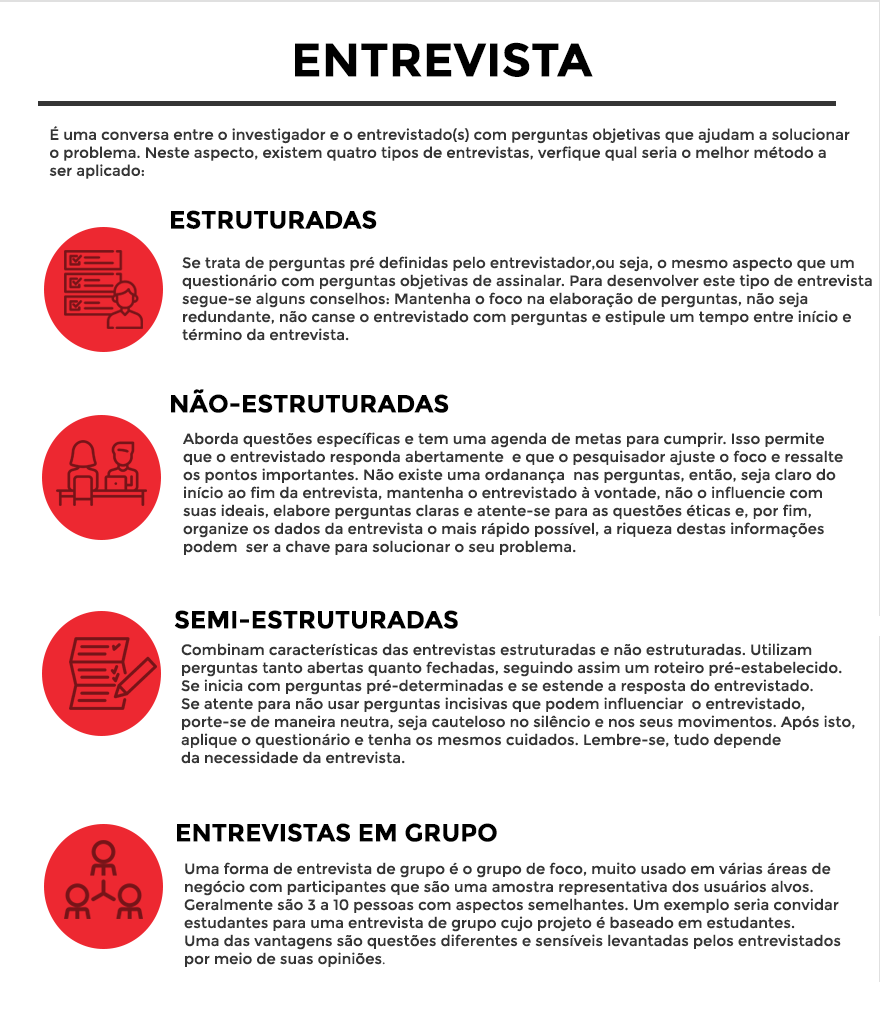
<style>
.page{position:relative;width:880px;height:1034px;background:#ffffff}
.page>*{position:absolute;margin:0}
.t1{font:47px "Montserrat-Bold";color:#000000}
.t2{font:15px/18px "Montserrat-Regular";color:#353535}
.t3{font:25px "Montserrat-Bold";color:#000000}
.t4{font:15px "Montserrat-Regular";color:#353535}
.t5{font:15px "MyriadPro-Regular";color:#353535}
</style>
<div class="page">
<p class="t1" style="left:295px;top:42px;width:298px;height:35px">ENTREVISTA</p>
<p class="t2" style="left:49px;top:126px;width:801px;height:53px">É uma conversa entre o investigador e o entrevistado(s) com perguntas objetivas que ajudam a solucionar <br>o problema. Neste aspecto, existem quatro tipos de entrevistas, verfique qual seria o melhor método a <br>ser aplicado:</p>
<p class="t3" style="left:171px;top:210px;width:206px;height:19px">ESTRUTURADAS</p>
<p class="t4" style="left:182px;top:256px;width:690px;height:85px">Se trata de perguntas pré definidas pelo entrevistador,ou seja, o mesmo aspecto que um <br>questionário com perguntas objetivas de assinalar. Para desenvolver este tipo de entrevista<br>segue-se alguns conselhos: Mantenha o foco na elaboração de perguntas, não seja <br>redundante, não canse o entrevistado com perguntas e estipule um tempo entre início e <br>término da entrevista.</p>
<p class="t3" style="left:171px;top:389px;width:278px;height:24px">NÃO-ESTRUTURADAS</p>
<p class="t4" style="left:183px;top:432px;width:660px;height:123px">Aborda questões específicas e tem uma agenda de metas para cumprir. Isso permite <br>que o entrevistado responda abertamente  e que o pesquisador ajuste o foco e ressalte <br>os pontos importantes. Não existe uma ordanança  nas perguntas, então, seja claro do <br>início ao fim da entrevista, mantenha o entrevistado à vontade, não o influencie com <br>suas ideais, elabore perguntas claras e atente-se para as questões éticas e, por fim, <br>organize os dados da entrevista o mais rápido possível, a riqueza destas informações <br>podem  ser a chave para solucionar o seu problema.</p>
<p class="t3" style="left:174px;top:610px;width:284px;height:19px">SEMI-ESTRUTURADAS</p>
<p class="t4" style="left:181px;top:643px;width:674px;height:121px">Combinam características das entrevistas estruturadas e não estruturadas. Utilizam <br>perguntas tanto abertas quanto fechadas, seguindo assim um roteiro pré-estabelecido. <br>Se inicia com perguntas pré-determinadas e se estende a resposta do entrevistado. <br>Se atente para não usar perguntas incisivas que podem influenciar  o entrevistado, <br>porte-se de maneira neutra, seja cauteloso no silêncio e nos seus movimentos. Após isto, <br>aplique o questionário e tenha os mesmos cuidados. Lembre-se, tudo depende <br>da necessidade da entrevista.</p>
<p class="t3" style="left:177px;top:823px;width:320px;height:19px">ENTREVISTAS EM GRUPO</p>
<p class="t4" style="left:184px;top:862px;width:657px;height:105px">Uma forma de entrevista de grupo é o grupo de foco, muito usado em várias áreas de <br>negócio com participantes que são uma amostra representativa dos usuários alvos. <br>Geralmente são 3 a 10 pessoas com aspectos semelhantes. Um exemplo seria convidar <br>estudantes para uma entrevista de grupo cujo projeto é baseado em estudantes.  <br>Uma das vantagens são questões diferentes e sensíveis levantadas pelos entrevistados <br>por meio de suas opiniões<span class="t5">.</span></p>
</div>
